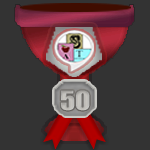
<style>
.page{position:relative;width:150px;height:150px;background:#333333}
.page>*{position:absolute;margin:0}
.t1{font:24.2px "Impact";color:#c0beb9;scale:1.16 1}
</style>
<div class="page">
<p class="t1" style="left:61px;top:90px;width:29px;height:21px">50</p>
</div>
